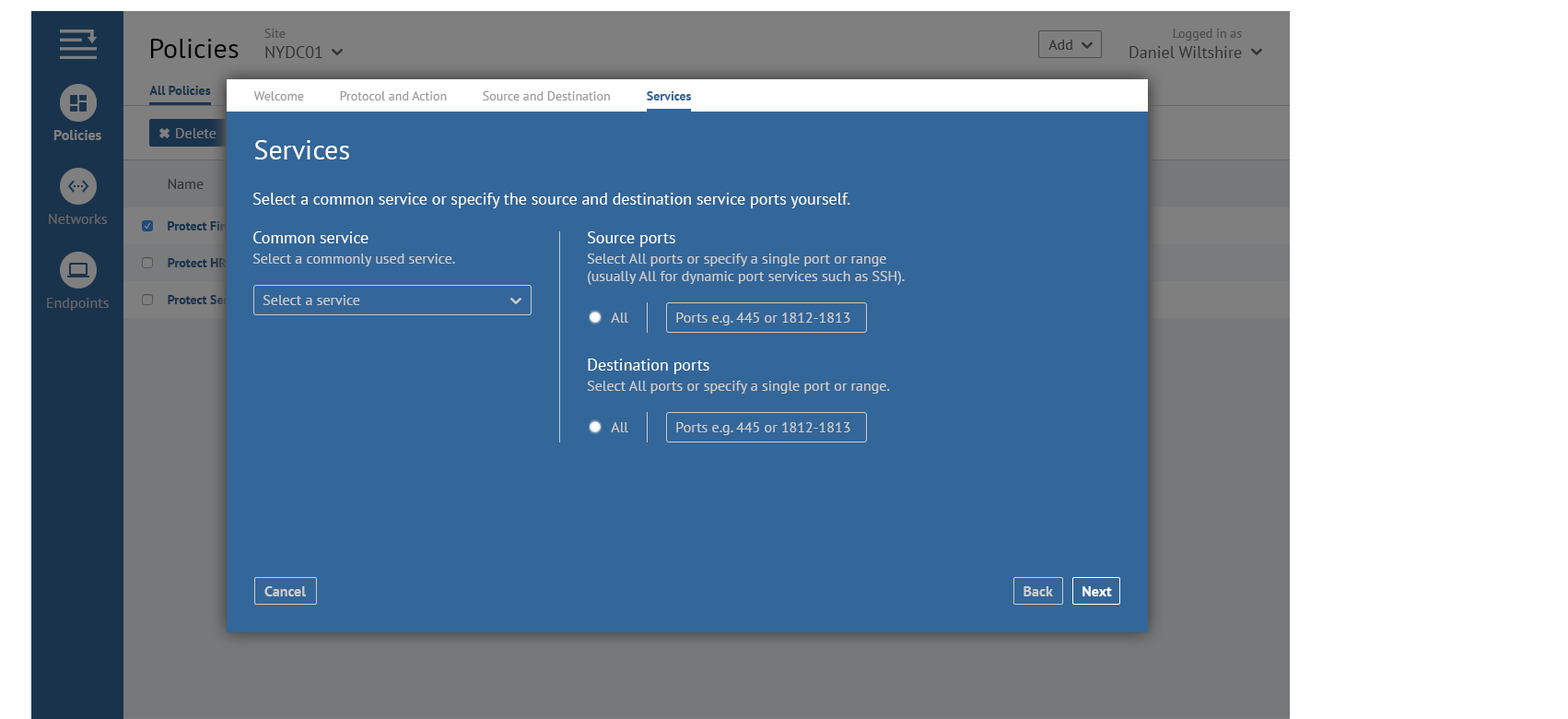
<style>
.page{position:relative;width:1568px;height:719px;background:#336699}
.page>*{position:absolute;margin:0}
.t1{font:16.6px "PTSans-Regular"}
.t2{font:12.9px "PTSans-Regular"}
.t3{font:16.8px "PTSans-Regular"}
.t4{font:13.1px "PTSans-Regular"}
.t5{font:27.6px "PTSans-Regular";color:#000000}
.t6{font:14.7px "PTSans-Regular";color:#333333}
.t7{font:12.8px "PTSans-Bold";color:#19334c}
.t8{font:12.8px "PTSans-Regular";color:#999999}
.t9{font:12.8px "PTSans-Bold";color:#336699}
.t10{font:14.7px "PTSans-Bold";color:#7f7f7f}
.t11{font:14.7px "PTSans-Regular";color:#7f7f7f}
.t12{font:27.6px "PTSans-Regular";color:#ffffff}
.t13{font:16.6px "PTSans-Regular";color:#ffffff}
.t14{font:14.7px "PTSans-Regular";color:#666666}
.t15{font:12.9px "PTSans-Bold"}
.t16{font:12.9px "PTSans-Bold";color:#19334c}
.t17{font:14.7px "PTSans-Regular";color:#cccccc}
.t18{font:14.7px "PTSans-Bold";color:#cccccc}
.t19{font:14.7px "PTSans-Bold";color:#ffffff}
</style>
<div class="page">
<p class="t1" style="left:264px;top:29px;width:58px;height:29px"><span class="t2">Site<br></span>NYDC01</p>
<p class="t3" style="left:1129px;top:29px;width:113px;height:29px;text-align:right"><span class="t4">Logged in as<br></span>Daniel Wiltshire</p>
<p class="t5" style="left:151px;top:39px;width:88px;height:19px">Policies</p>
<p class="t6" style="left:1048px;top:40px;width:24px;height:10px">Add</p>
<p class="t7" style="left:149px;top:86px;width:62px;height:9px">All Policies</p>
<p class="t8" style="left:253px;top:91px;width:51px;height:9px">Welcome</p>
<p class="t8" style="left:340px;top:91px;width:107px;height:9px">Protocol and Action</p>
<p class="t8" style="left:483px;top:91px;width:127px;height:9px">Source and Destination</p>
<p class="t9" style="left:647px;top:91px;width:45px;height:9px">Services</p>
<p class="t10" style="left:53px;top:130px;width:48px;height:10px">Policies</p>
<p class="t11" style="left:176px;top:128px;width:40px;height:10px">Delete</p>
<p class="t12" style="left:254px;top:140px;width:95px;height:19px">Services</p>
<p class="t6" style="left:168px;top:179px;width:36px;height:10px">Name</p>
<p class="t13" style="left:253px;top:193px;width:597px;height:15px">Select a common service or specify the source and destination service ports yourself.</p>
<p class="t14" style="left:49px;top:214px;width:58px;height:10px">Networks</p>
<p class="t15" style="left:168px;top:221px;width:84px;height:9px">Protect Finance</p>
<p class="t13" style="left:253px;top:231px;width:116px;height:12px">Common service</p>
<p class="t13" style="left:588px;top:231px;width:87px;height:16px">Source ports</p>
<p class="t16" style="left:168px;top:258px;width:59px;height:9px">Protect HR</p>
<p class="t17" style="left:252px;top:253px;width:203px;height:13px">Select a commonly used service.</p>
<p class="t17" style="left:587px;top:253px;width:318px;height:32px">Select All ports or specify a single port or range<br>(usually All for dynamic port services such as SSH).</p>
<p class="t14" style="left:47px;top:298px;width:62px;height:12px">Endpoints</p>
<p class="t15" style="left:168px;top:295px;width:83px;height:9px">Protect Servers</p>
<p class="t17" style="left:263px;top:295px;width:97px;height:10px">Select a service</p>
<p class="t17" style="left:611px;top:312px;width:17px;height:10px">All</p>
<p class="t17" style="left:676px;top:312px;width:174px;height:13px">Ports e.g. 445 or 1812-1813</p>
<p class="t13" style="left:588px;top:358px;width:121px;height:16px">Destination ports</p>
<p class="t17" style="left:587px;top:380px;width:303px;height:13px">Select All ports or specify a single port or range.</p>
<p class="t17" style="left:611px;top:422px;width:17px;height:10px">All</p>
<p class="t17" style="left:676px;top:422px;width:174px;height:13px">Ports e.g. 445 or 1812-1813</p>
<p class="t18" style="left:264px;top:586px;width:42px;height:10px">Cancel</p>
<p class="t18" style="left:1024px;top:586px;width:29px;height:10px">Back</p>
<p class="t19" style="left:1082px;top:586px;width:30px;height:10px">Next</p>
</div>
